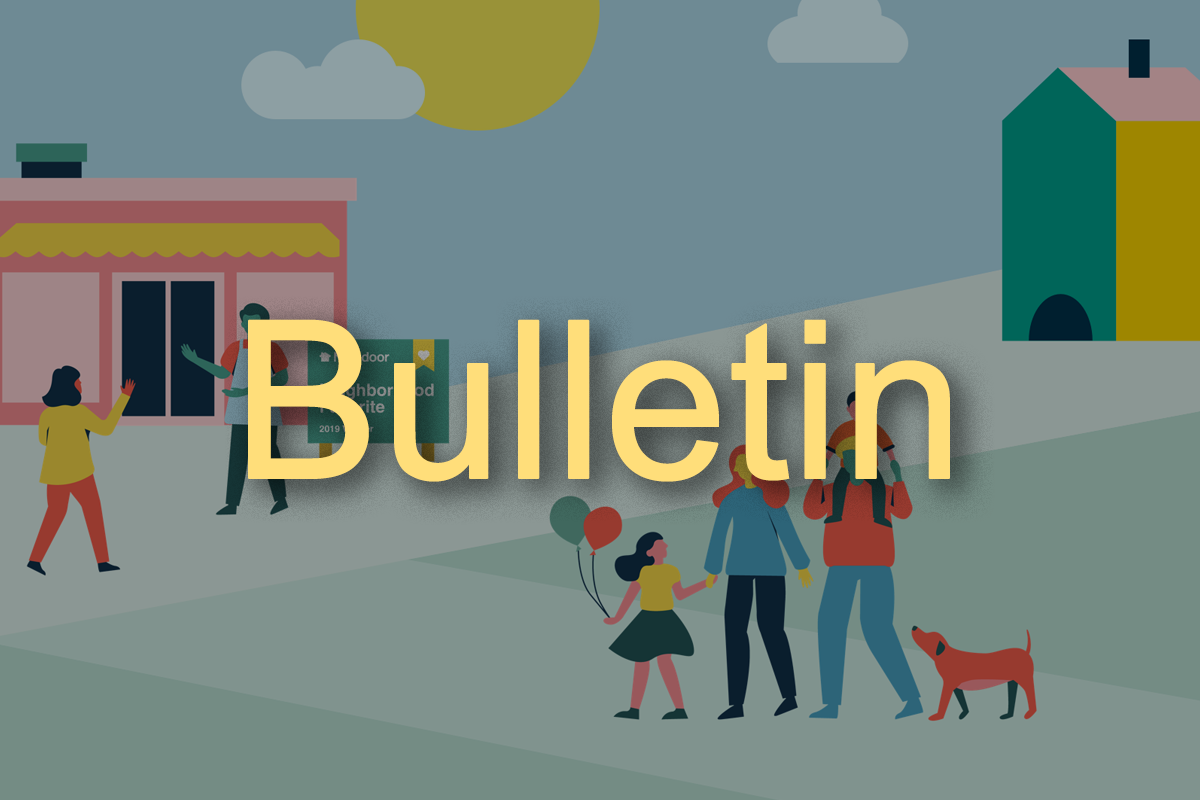
<style>
.page{position:relative;width:1200px;height:800px;background:#6e8a94}
.page>*{position:absolute;margin:0}
.t1{font:219.4px "ArialMT";letter-spacing:-0.02em;color:#ffde7a;font-weight:bold}
</style>
<div class="page">
<p class="t1" style="left:248px;top:319px;width:702px;height:163px">Bulletin</p>
</div>
